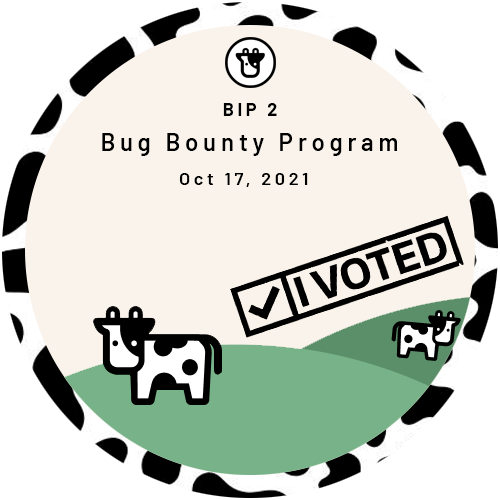
<style>
.page{position:relative;width:500px;height:500px;background:#f9f3eb}
.page>*{position:absolute;margin:0}
.t1{font:18px "Barlow-Bold";letter-spacing:0.2em;color:#000000}
.t2{font:24px "Barlow-SemiBold";letter-spacing:0.2em;color:#000000}
.t3{font:18px "Barlow-SemiBold";letter-spacing:0.2em;color:#000000}
</style>
<div class="page">
<p class="t1" style="left:223px;top:103px;width:54px;height:13px">BIP 2</p>
<p class="t2" style="left:102px;top:133px;width:295px;height:23px">Bug Bounty Program</p>
<p class="t3" style="left:179px;top:173px;width:129px;height:14px">Oct 17, 2021</p>
</div>
